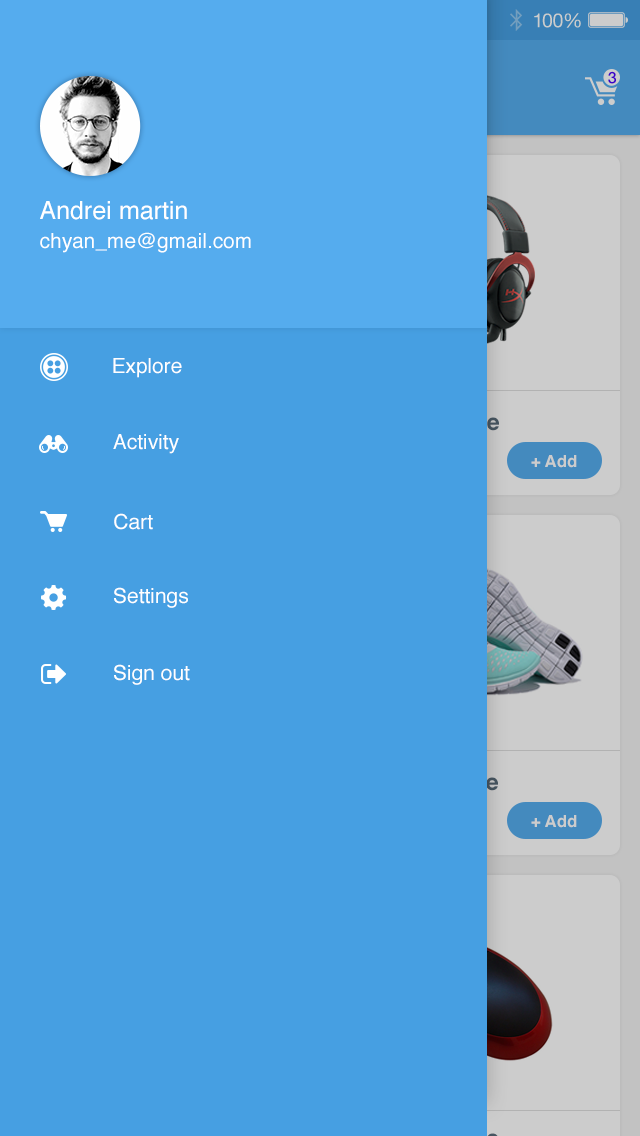
<style>
.page{position:relative;width:640px;height:1136px;background:#469fe2}
.page>*{position:absolute;margin:0}
.t1{font:25px "Helvetica";color:#ffffff}
.t2{font:20.8px "Helvetica";color:#ffffff}
</style>
<div class="page">
<p class="t1" style="left:40px;top:201px;width:147px;height:19px">Andrei martin</p>
<p class="t2" style="left:40px;top:232px;width:211px;height:21px">chyan_me@gmail.com</p>
<p class="t2" style="left:113px;top:358px;width:69px;height:20px">Explore</p>
<p class="t2" style="left:113px;top:434px;width:66px;height:20px">Activity</p>
<p class="t2" style="left:114px;top:513px;width:39px;height:17px">Cart</p>
<p class="t2" style="left:114px;top:587px;width:74px;height:21px">Settings</p>
<p class="t2" style="left:114px;top:664px;width:76px;height:21px">Sign out</p>
</div>
